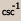
<style>
.page{position:relative;width:21px;height:21px;background:#d9cdc1}
.page>*{position:absolute;margin:0}
.t1{font:9px "Tahoma";color:#000000}
</style>
<div class="page">
<p class="t1" style="left:12px;top:2px;width:8px;height:7px">-1</p>
<p class="t1" style="left:2px;top:9px;width:13px;height:7px">csc</p>
</div>
